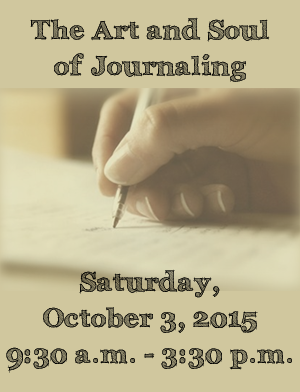
<style>
.page{position:relative;width:300px;height:392px;background:#d0c79e}
.page>*{position:absolute;margin:0}
.t1{font:27px/36px "Archistico-Bold";color:#000000}
</style>
<div class="page">
<p class="t1" style="left:6px;top:17px;width:286px;height:356px;text-align:center">The Art and Soul <br>of Journaling<br><br><br><br><br><br>Saturday, <br>October 3, 2015<br>9:30 a.m. - 3:30 p.m.</p>
</div>
